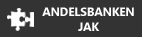
<style>
.page{position:relative;width:142px;height:37px;background:#333333}
.page>*{position:absolute;margin:0}
.t1{font:12px/1.8px "MicrosoftTaiLe-Bold";letter-spacing:-0.02em;color:#ffffff}
</style>
<div class="page">
<p class="t1" style="left:42px;top:7px;width:92px;height:24px;text-align:center">ANDELSBANKEN<br><br><br><br><br><br><br><br>JAK</p>
</div>
